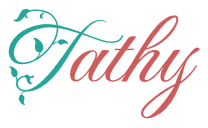
<style>
.page{position:relative;width:208px;height:128px;background:#ffffff}
.page>*{position:absolute;margin:0}
.t1{font:96px "FleurDeLeah-Regular";color:#cd5c5c}
.t2{font:96px "FleurDeLeah-Regular";color:#26a69a}
</style>
<div class="page">
<p class="t1" style="left:8px;top:8px;width:192px;height:111px"><span class="t2">T</span>athy</p>
</div>
